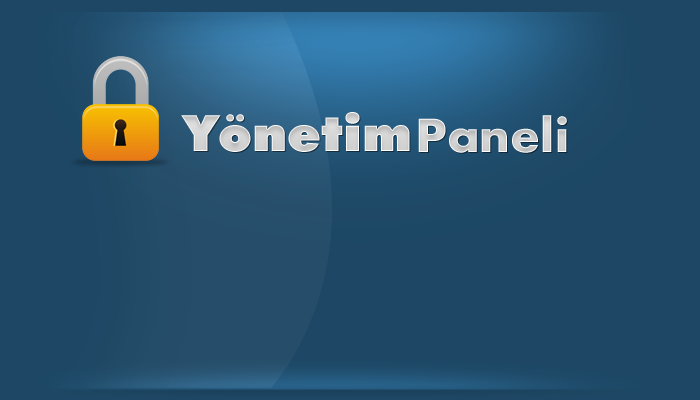
<style>
.page{position:relative;width:700px;height:400px;background:#1d4764}
.page>*{position:absolute;margin:0}
.t1{font:50px "FuturaBT-ExtraBlack";color:#d1d2d1;scale:1.05 1}
.t2{font:50px "Futura-Bold";color:#d1d2d1;scale:1.05 1}
</style>
<div class="page">
<p class="t1" style="left:181px;top:112px;width:229px;height:40px">Yönetim</p>
<p class="t2" style="left:418px;top:115px;width:149px;height:38px">Paneli</p>
</div>
